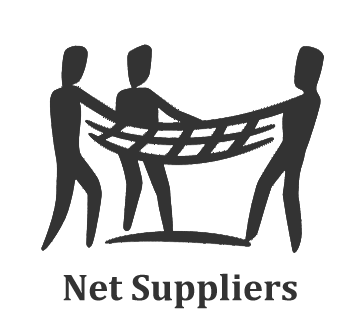
<style>
.page{position:relative;width:351px;height:324px;background:#ffffff}
.page>*{position:absolute;margin:0}
.t1{font:38px "Cambria-Bold";color:#333333}
</style>
<div class="page">
<p class="t1" style="left:63px;top:273px;width:234px;height:36px">Net Suppliers</p>
</div>
